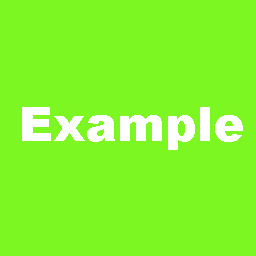
<style>
.page{position:relative;width:256px;height:256px;background:#7cf722}
.page>*{position:absolute;margin:0}
.t1{font:48px "Arial-Black";color:#ffffff}
</style>
<div class="page">
<p class="t1" style="left:22px;top:107px;width:221px;height:43px">Example</p>
</div>
